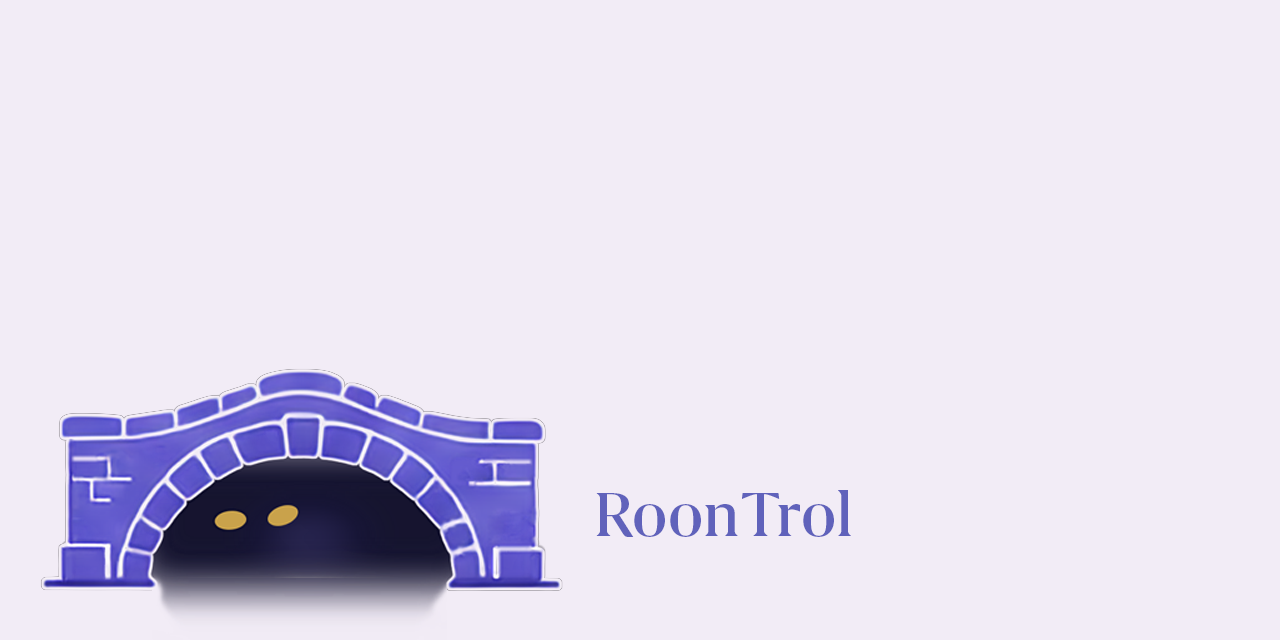
<style>
.page{position:relative;width:1280px;height:640px;background:#f2ecf6}
.page>*{position:absolute;margin:0}
.t1{font:72px "GrifoM-Medium";color:#6062bb}
</style>
<div class="page">
<p class="t1" style="left:596px;top:490px;width:255px;height:47px">RoonTrol</p>
</div>
